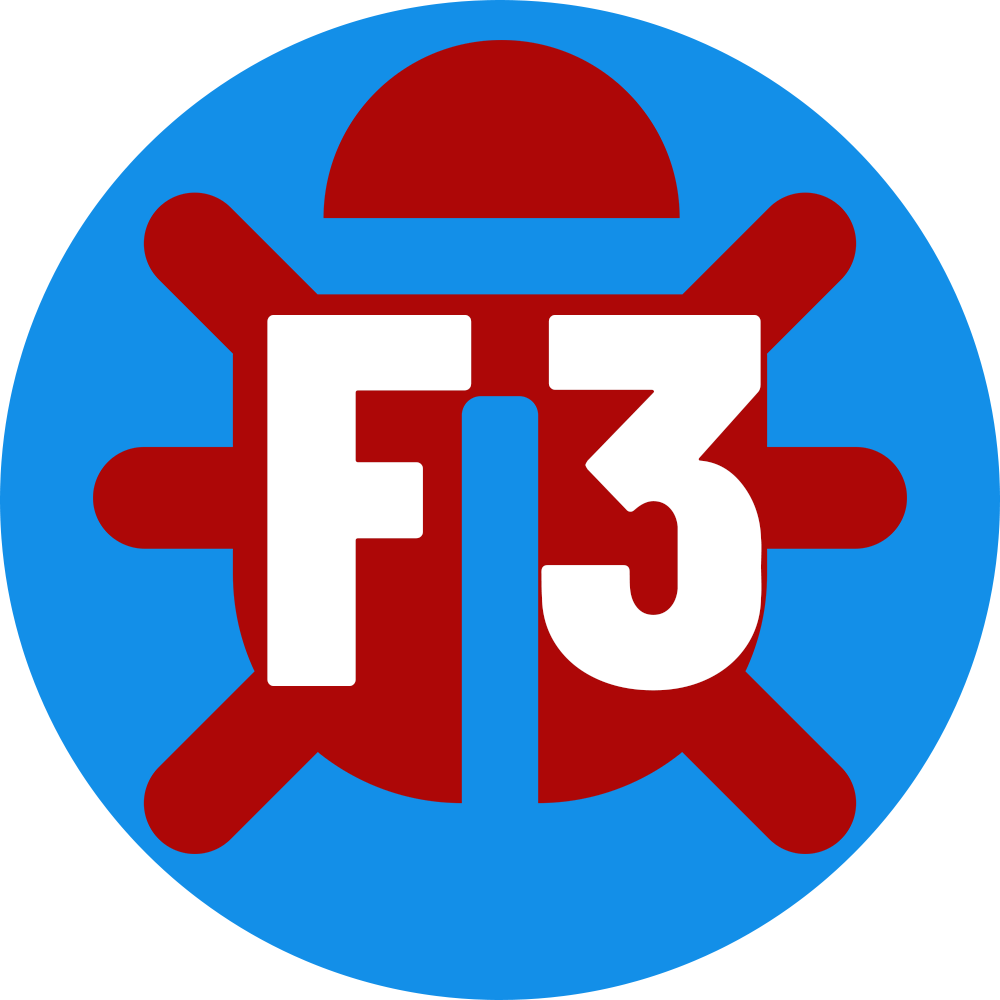
<style>
.page{position:relative;width:1000px;height:1000px;background:#138fe8}
.page>*{position:absolute;margin:0}
.t1{font:530px "BarlowCondensed-ExtraBold";color:#ffffff}
</style>
<div class="page">
<p class="t1" style="left:267px;top:315px;width:205px;height:371px">F</p>
<p class="t1" style="left:541px;top:315px;width:221px;height:376px">3</p>
</div>
